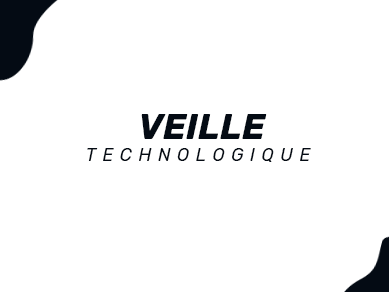
<style>
.page{position:relative;width:389px;height:292px;background:#ffffff}
.page>*{position:absolute;margin:0}
.t1{font:36.1px "Rubik-BoldItalic";color:#040b14}
.t2{font:18.1px "Rubik-Italic";letter-spacing:0.36em;color:#040b14}
</style>
<div class="page">
<p class="t1" style="left:141px;top:114px;width:126px;height:25px">VEILLE</p>
<p class="t2" style="left:87px;top:148px;width:224px;height:14px">TECHNOLOGIQUE</p>
</div>
